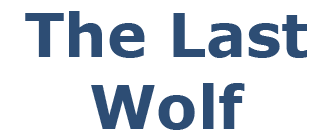
<style>
.page{position:relative;width:333px;height:134px;background:#ffffff}
.page>*{position:absolute;margin:0}
.t1{font:60px "Verdana-Bold";color:#2d4d74}
</style>
<div class="page">
<p class="t1" style="left:25px;top:11px;width:282px;height:119px;text-align:center">The Last Wolf</p>
</div>
